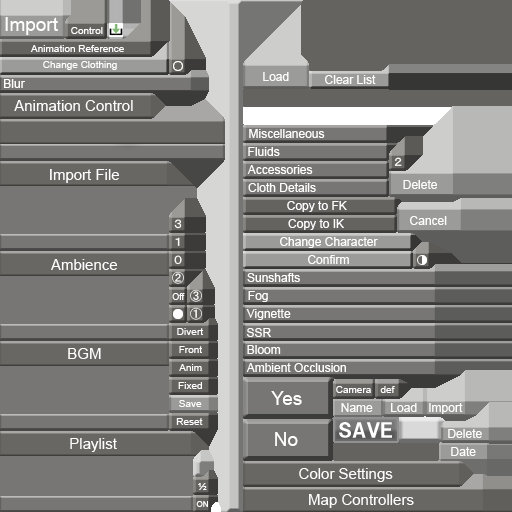
<style>
.page{position:relative;width:512px;height:512px;background:#777674}
.page>*{position:absolute;margin:0}
.t1{font:19px "ArialMT";color:#ffffff}
.t2{font:10px "ArialMT";color:#ffffff}
.t3{font:12px "ArialMT";color:#ffffff}
.t4{font:15px "ArialMT";color:#ffffff}
.t5{font:8.9px "ArialMT";color:#ffffff}
.t6{font:8px "ArialMT";color:#ffffff}
</style>
<div class="page">
<p class="t1" style="left:5px;top:17px;width:53px;height:18px">Import</p>
<p class="t2" style="left:71px;top:27px;width:32px;height:7px">Control</p>
<p class="t2" style="left:30px;top:45px;width:94px;height:7px">Animation Reference</p>
<p class="t2" style="left:43px;top:61px;width:74px;height:9px">Change Clothing</p>
<p class="t3" style="left:263px;top:72px;width:26px;height:9px">Load</p>
<p class="t3" style="left:325px;top:75px;width:51px;height:9px">Clear List</p>
<p class="t3" style="left:4px;top:79px;width:21px;height:9px">Blur</p>
<p class="t4" style="left:14px;top:100px;width:119px;height:11px">Animation Control</p>
<p class="t3" style="left:249px;top:129px;width:76px;height:9px">Miscellaneous</p>
<p class="t3" style="left:248px;top:147px;width:32px;height:9px">Fluids</p>
<p class="t4" style="left:50px;top:169px;width:69px;height:14px">Import File</p>
<p class="t3" style="left:247px;top:165px;width:66px;height:9px">Accessories</p>
<p class="t3" style="left:248px;top:183px;width:68px;height:9px">Cloth Details</p>
<p class="t3" style="left:403px;top:180px;width:34px;height:9px">Delete</p>
<p class="t3" style="left:287px;top:201px;width:60px;height:11px">Copy to FK</p>
<p class="t3" style="left:288px;top:219px;width:56px;height:11px">Copy to IK</p>
<p class="t3" style="left:410px;top:216px;width:37px;height:9px">Cancel</p>
<p class="t3" style="left:280px;top:237px;width:98px;height:11px">Change Character</p>
<p class="t3" style="left:308px;top:255px;width:41px;height:9px">Confirm</p>
<p class="t4" style="left:51px;top:259px;width:66px;height:11px">Ambience</p>
<p class="t3" style="left:247px;top:273px;width:53px;height:9px">Sunshafts</p>
<p class="t5" style="left:172px;top:293px;width:13px;height:7px">Off</p>
<p class="t3" style="left:248px;top:291px;width:20px;height:11px">Fog</p>
<p class="t3" style="left:246px;top:309px;width:45px;height:11px">Vignette</p>
<p class="t2" style="left:177px;top:328px;width:26px;height:7px">Divert</p>
<p class="t3" style="left:247px;top:328px;width:24px;height:9px">SSR</p>
<p class="t4" style="left:68px;top:348px;width:33px;height:11px">BGM</p>
<p class="t2" style="left:179px;top:346px;width:23px;height:7px">Front</p>
<p class="t3" style="left:247px;top:345px;width:34px;height:9px">Bloom</p>
<p class="t2" style="left:179px;top:364px;width:23px;height:7px">Anim</p>
<p class="t3" style="left:246px;top:363px;width:100px;height:9px">Ambient Occlusion</p>
<p class="t2" style="left:178px;top:382px;width:24px;height:7px">Fixed</p>
<p class="t2" style="left:336px;top:386px;width:35px;height:7px">Camera</p>
<p class="t2" style="left:380px;top:386px;width:15px;height:7px">def</p>
<p class="t2" style="left:179px;top:400px;width:23px;height:7px">Save</p>
<p class="t1" style="left:271px;top:391px;width:31px;height:14px">Yes</p>
<p class="t3" style="left:341px;top:403px;width:32px;height:9px">Name</p>
<p class="t3" style="left:391px;top:403px;width:26px;height:9px">Load</p>
<p class="t3" style="left:429px;top:403px;width:34px;height:11px">Import</p>
<p class="t2" style="left:176px;top:418px;width:27px;height:7px">Reset</p>
<p class="t4" style="left:70px;top:438px;width:47px;height:14px">Playlist</p>
<p class="t1" style="left:275px;top:432px;width:23px;height:14px">No</p>
<p class="t3" style="left:448px;top:429px;width:34px;height:9px">Delete</p>
<p class="t3" style="left:451px;top:447px;width:25px;height:9px">Date</p>
<p class="t4" style="left:299px;top:468px;width:94px;height:14px">Color Settings</p>
<p class="t2" style="left:198px;top:483px;width:9px;height:7px">½</p>
<p class="t4" style="left:309px;top:494px;width:105px;height:14px">Map Controllers</p>
<p class="t6" style="left:196px;top:501px;width:12px;height:6px">ON</p>
</div>
